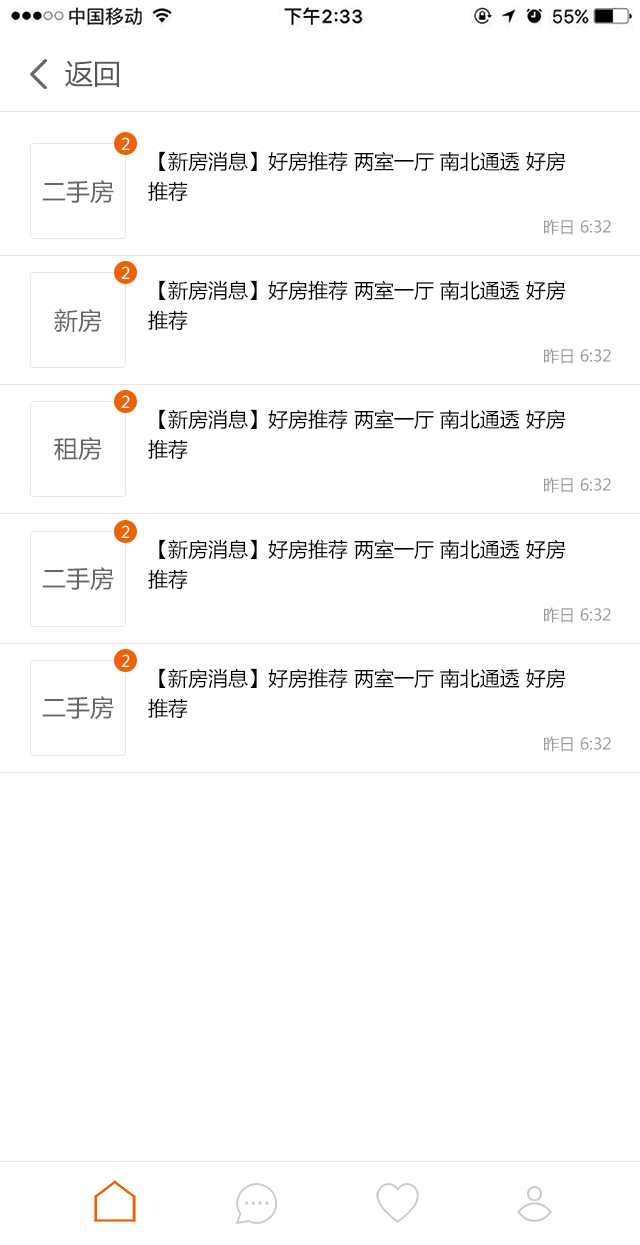
<style>
.page{position:relative;width:640px;height:1245px;background:#ffffff}
.page>*{position:absolute;margin:0}
.t1{font:28px "MicrosoftYaHei";color:#585757}
.t2{font:16px "MicrosoftYaHei";color:#ffffff}
.t3{font:20px/30px "MicrosoftYaHei";color:#000000}
.t4{font:24px "MicrosoftYaHei";color:#666666}
.t5{font:16px "MicrosoftYaHei";color:#999999}
</style>
<div class="page">
<p class="t1" style="left:65px;top:60px;width:54px;height:27px">返回</p>
<p class="t2" style="left:121px;top:137px;width:9px;height:13px">2</p>
<p class="t3" style="left:148px;top:151px;width:418px;height:50px">【新房消息】好房推荐 两室一厅 南北通透 好房<br>推荐</p>
<p class="t4" style="left:42px;top:180px;width:72px;height:24px">二手房</p>
<p class="t5" style="left:544px;top:219px;width:67px;height:16px">昨日 6:32</p>
<p class="t2" style="left:121px;top:266px;width:9px;height:13px">2</p>
<p class="t3" style="left:148px;top:280px;width:418px;height:50px">【新房消息】好房推荐 两室一厅 南北通透 好房<br>推荐</p>
<p class="t4" style="left:54px;top:308px;width:48px;height:25px">新房</p>
<p class="t5" style="left:544px;top:348px;width:67px;height:16px">昨日 6:32</p>
<p class="t2" style="left:121px;top:395px;width:9px;height:13px">2</p>
<p class="t3" style="left:148px;top:409px;width:418px;height:50px">【新房消息】好房推荐 两室一厅 南北通透 好房<br>推荐</p>
<p class="t4" style="left:54px;top:437px;width:48px;height:24px">租房</p>
<p class="t5" style="left:544px;top:477px;width:67px;height:16px">昨日 6:32</p>
<p class="t2" style="left:121px;top:525px;width:9px;height:13px">2</p>
<p class="t3" style="left:148px;top:539px;width:418px;height:50px">【新房消息】好房推荐 两室一厅 南北通透 好房<br>推荐</p>
<p class="t4" style="left:42px;top:567px;width:72px;height:24px">二手房</p>
<p class="t5" style="left:544px;top:607px;width:67px;height:16px">昨日 6:32</p>
<p class="t2" style="left:121px;top:654px;width:9px;height:13px">2</p>
<p class="t3" style="left:148px;top:668px;width:418px;height:50px">【新房消息】好房推荐 两室一厅 南北通透 好房<br>推荐</p>
<p class="t4" style="left:42px;top:696px;width:72px;height:24px">二手房</p>
<p class="t5" style="left:544px;top:736px;width:67px;height:16px">昨日 6:32</p>
</div>
